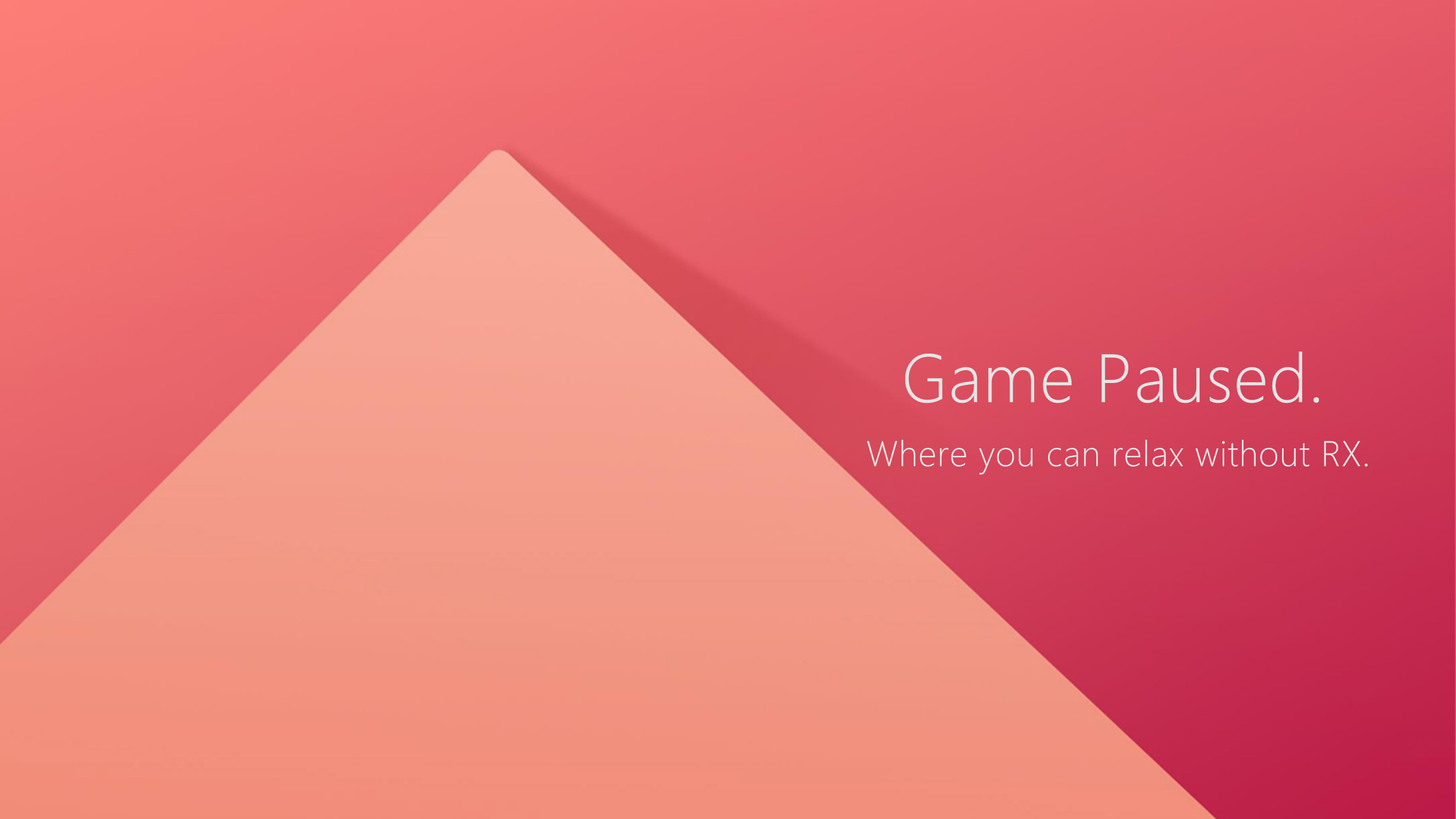
<style>
.page{position:relative;width:1456px;height:819px}
.page>*{position:absolute;margin:0}
.t1{font:62.9px "MicrosoftYaHeiUILight";letter-spacing:0.02em;color:#e5e5e5}
.t2{font:33px "MicrosoftYaHeiUILight";letter-spacing:0.02em;color:#e5e5e5}
</style>
<div class="page">
<p class="t1" style="left:905px;top:351px;width:414px;height:52px">Game Paused.</p>
<p class="t2" style="left:867px;top:440px;width:501px;height:34px">Where you can relax without RX.</p>
</div>
